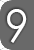
<style>
.page{position:relative;width:34px;height:50px;background:#696969}
.page>*{position:absolute;margin:0}
.t1{font:44.2px "CenturyGothic";color:#ffffff}
</style>
<div class="page">
<p class="t1" style="left:7px;top:9px;width:20px;height:34px">9</p>
</div>
